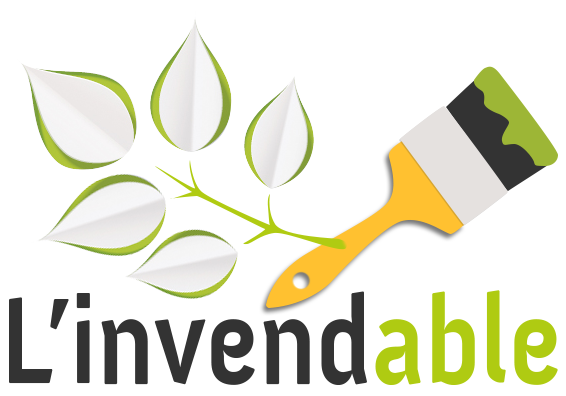
<style>
.page{position:relative;width:566px;height:396px;background:#ffffff}
.page>*{position:absolute;margin:0}
.t1{font:123.8px "Gbgoupnlzcuukghqnolesjbedyw";color:#333333;scale:0.84 1}
.t2{font:123.8px "Gbgoupnlzcuukghqnolesjbedyw";color:#afcb12;scale:0.84 1}
</style>
<div class="page">
<p class="t1" style="left:9px;top:290px;width:549px;height:95px">L’invend<span class="t2">able</span></p>
</div>
